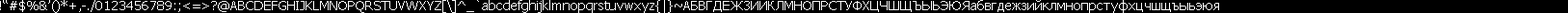
<style>
.page{position:relative;width:1568px;height:13px;background:#000000}
.page>*{position:absolute;margin:0}
.t1{font:13.5px "Tahoma";color:#ffffff}
</style>
<div class="page">
<p class="t1" style="left:0px;top:0px;width:1219px;height:13px">!“#$%&amp;’()*+,-./0123456789:;&lt;=&gt;?@ABCDEFGHIJKLMNOPQRSTUVWXYZ[\]^_`abcdefghijklmnopqrstuvwxyz{|}~АБВГДЕЖЗИЙКЛМНОПРСТУФХЦЧШЩЪЫЬЭЮЯабвгдежзийклмнопрстуфхцчшщъыьэюя</p>
</div>
